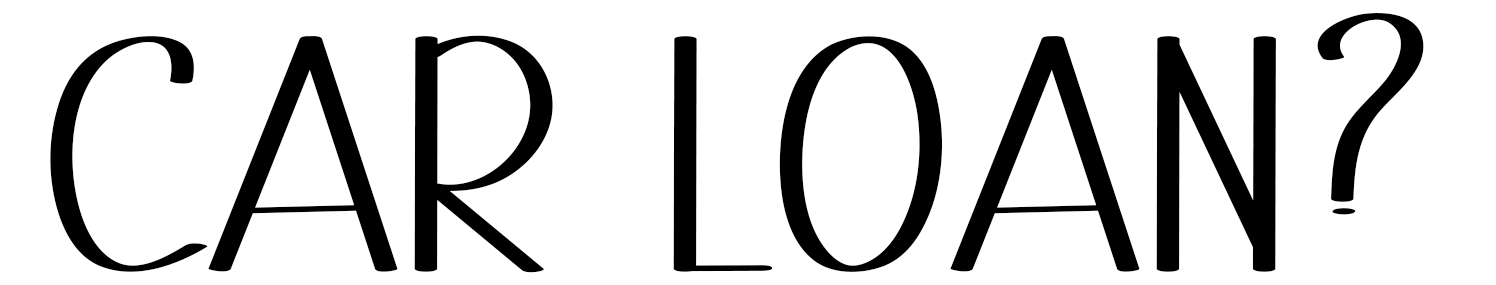
<style>
.page{position:relative;width:1496px;height:285px;background:#ffffff}
.page>*{position:absolute;margin:0}
.t1{font:491.7px "MinimalistRegular";color:#000000}
</style>
<div class="page">
<p class="t1" style="left:50px;top:13px;width:1374px;height:260px">CAR LOAN?</p>
</div>
